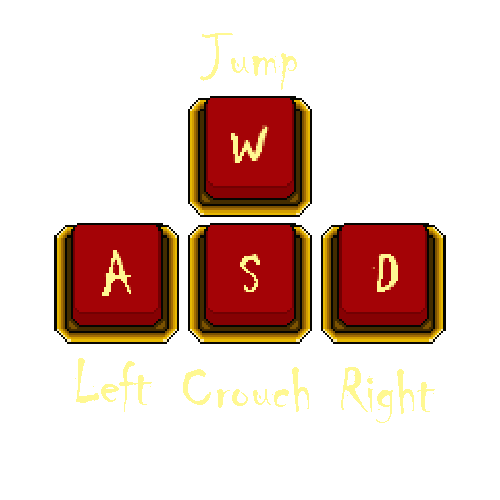
<style>
.page{position:relative;width:500px;height:500px;background:#ffffff}
.page>*{position:absolute;margin:0}
.t1{font:62.4px "Chiller-Regular";color:#fff892}
</style>
<div class="page">
<p class="t1" style="left:200px;top:33px;width:97px;height:57px">Jump</p>
<p class="t1" style="left:75px;top:358px;width:77px;height:54px">Left</p>
<p class="t1" style="left:183px;top:367px;width:126px;height:45px">Crouch</p>
<p class="t1" style="left:341px;top:367px;width:94px;height:56px">Right</p>
</div>
